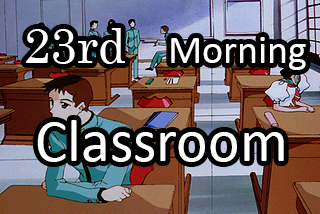
<style>
.page{position:relative;width:320px;height:214px}
.page>*{position:absolute;margin:0}
.t1{font:48px "Century";color:#ffffff}
.t2{font:40px "Calibri";color:#ffffff}
.t3{font:60px "Calibri";color:#ffffff}
</style>
<div class="page">
<p class="t1" style="left:26px;top:28px;width:99px;height:36px">23rd</p>
<p class="t2" style="left:171px;top:37px;width:135px;height:33px">Morning</p>
<p class="t3" style="left:37px;top:120px;width:247px;height:42px">Classroom</p>
</div>
